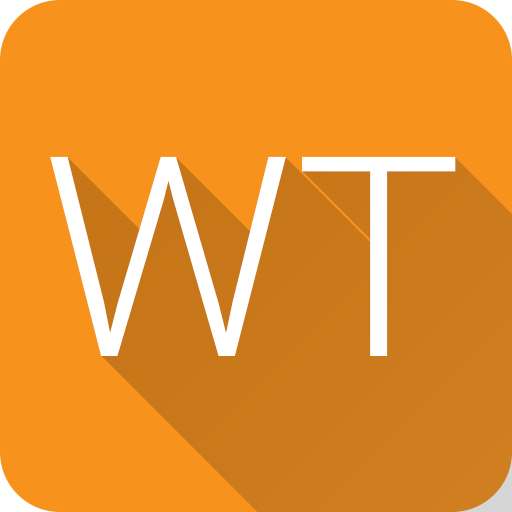
<style>
.page{position:relative;width:512px;height:512px;background:#f7921d}
.page>*{position:absolute;margin:0}
.t1{font:280px "Roboto-Light";color:#ffffff}
</style>
<div class="page">
<p class="t1" style="left:50px;top:156px;width:406px;height:200px">WT</p>
</div>
